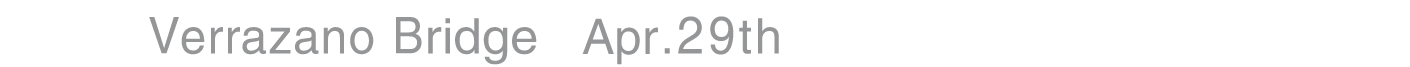
<style>
.page{position:relative;width:1410px;height:67px;background:#ffffff}
.page>*{position:absolute;margin:0}
.t1{font:50.5px "Helvetica";letter-spacing:0.001em;color:#969696;scale:0.94 1}
.t2{font:50.4px "Helvetica";letter-spacing:-0.119em;color:#969696;scale:0.92 1}
.t3{font:52.7px "Helvetica";letter-spacing:0.085em;color:#969696;scale:0.92 1}
.t4{font:49.1px "Helvetica";letter-spacing:0.025em;color:#969696;scale:0.97 1}
.t5{font:49.1px "Helvetica";letter-spacing:0.001em;color:#969696;scale:1.04 1}
.t6{font:49.1px "Helvetica";letter-spacing:0.001em;color:#969696}
.t7{font:49.1px "Helvetica";letter-spacing:0.06em;color:#969696}
</style>
<div class="page">
<p class="t1" style="left:149px;top:17px;width:30px;height:37px">V</p>
<p class="t2" style="left:396px;top:17px;width:26px;height:37px">B</p>
<p class="t3" style="left:678px;top:16px;width:56px;height:39px">29</p>
<p class="t4" style="left:181px;top:27px;width:193px;height:28px">errazano</p>
<p class="t5" style="left:428px;top:18px;width:109px;height:47px">ridge</p>
<p class="t6" style="left:582px;top:18px;width:76px;height:47px">Apr</p>
<p class="t7" style="left:739px;top:18px;width:40px;height:36px">th</p>
<p class="t6" style="left:664px;top:48px;width:6px;height:6px">.</p>
</div>
